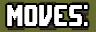
<style>
.page{position:relative;width:96px;height:32px;background:#ffffff}
.page>*{position:absolute;margin:0}
.t1{font:40.1px "UpheavalTT-BRK-";letter-spacing:0.04em;color:#ffffff;scale:0.58 1}
</style>
<div class="page">
<p class="t1" style="left:7px;top:5px;width:81px;height:21px">moves:</p>
</div>
